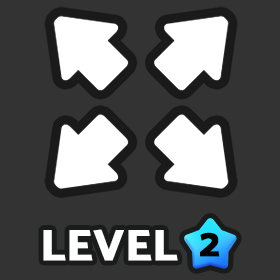
<style>
.page{position:relative;width:280px;height:280px;background:#333333}
.page>*{position:absolute;margin:0}
.t1{font:44px "Catamaran-ExtraBold";color:#ffffff;font-weight:bold}
.t2{font:40px "Catamaran-ExtraBold";color:#000000;font-weight:bold}
</style>
<div class="page">
<p class="t1" style="left:43px;top:229px;width:135px;height:32px">LEVEL</p>
<p class="t2" style="left:200px;top:232px;width:20px;height:25px">2</p>
</div>
